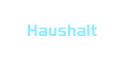
<style>
.page{position:relative;width:123px;height:60px;background:#ffffff}
.page>*{position:absolute;margin:0}
.t1{font:16px "AeroRegularSWFTE";color:#8bedff}
</style>
<div class="page">
<p class="t1" style="left:27px;top:24px;width:70px;height:12px">Haushalt</p>
</div>
